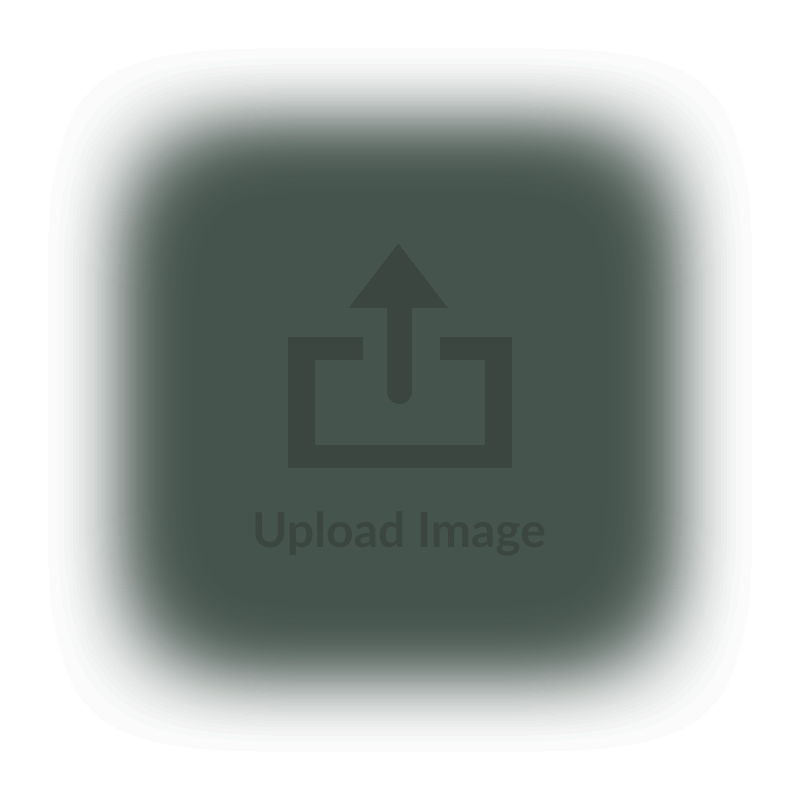
<style>
.page{position:relative;width:800px;height:800px;background:#ffffff}
.page>*{position:absolute;margin:0}
.t1{font:48px "Lato-Bold";color:#3b4640}
</style>
<div class="page">
<p class="t1" style="left:255px;top:511px;width:290px;height:45px">Upload Image</p>
</div>
